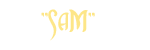
<style>
.page{position:relative;width:150px;height:50px;background:#ffffff}
.page>*{position:absolute;margin:0}
.t1{font:33.2px "Asrafel";color:#fde688;scale:0.8 1}
.t2{font:33.2px "CafeNoirBV";color:#fde688;scale:0.8 1}
</style>
<div class="page">
<p class="t1" style="left:41px;top:9px;width:54px;height:32px"><span class="t2">"</span>SaM<span class="t2">"</span></p>
</div>
